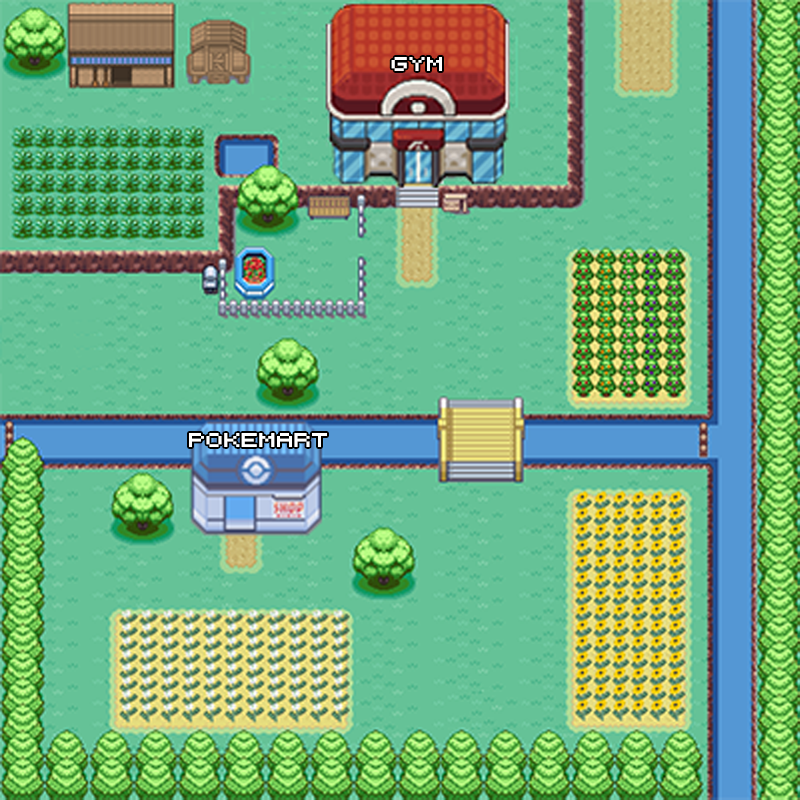
<style>
.page{position:relative;width:800px;height:800px}
.page>*{position:absolute;margin:0}
.t1{font:19.1px "RetroComputer";color:#ffffff;scale:1.09 1}
</style>
<div class="page">
<p class="t1" style="left:391px;top:57px;width:51px;height:14px">Gym</p>
<p class="t1" style="left:189px;top:433px;width:138px;height:14px">Pokemart</p>
</div>
